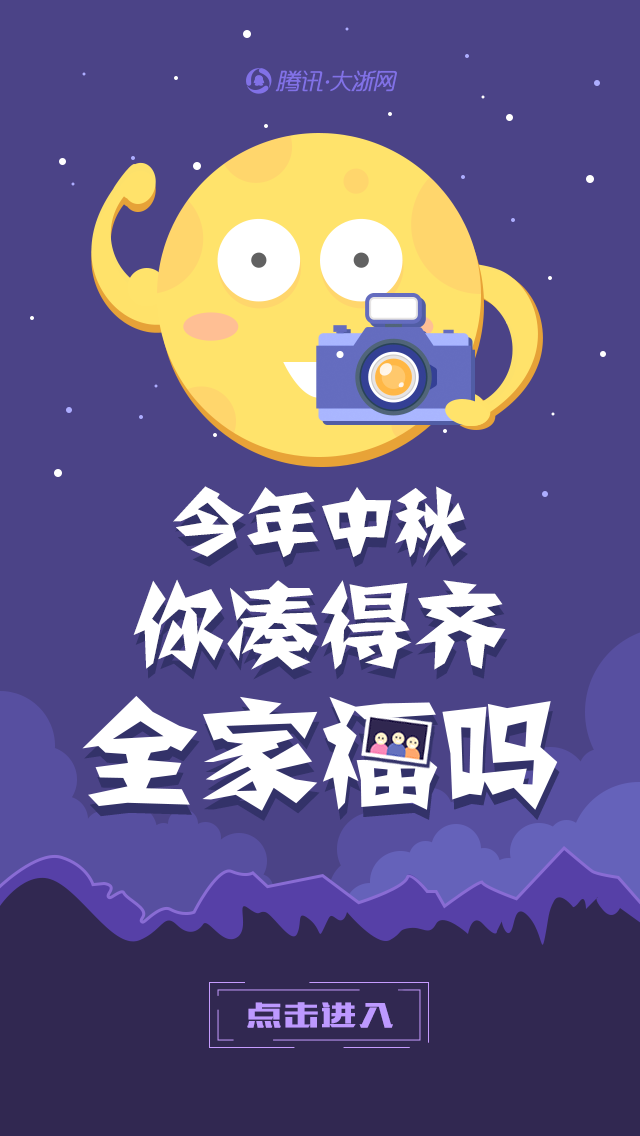
<style>
.page{position:relative;width:640px;height:1136px;background:#4b4387}
.page>*{position:absolute;margin:0}
.t1{font:74px "FZJZJW--GB1-0";color:#ffffff}
.t2{font:94px "FZJZJW--GB1-0";color:#ffffff}
.t3{font:34px "MFBanHei_Noncommercial-Regular";letter-spacing:0.1em;color:#bc98ff}
</style>
<div class="page">
<p class="t1" style="left:173px;top:486px;width:293px;height:72px">今年中秋</p>
<p class="t2" style="left:133px;top:579px;width:373px;height:91px">你凑得齐</p>
<p class="t3" style="left:247px;top:1002px;width:146px;height:26px">点击进入</p>
</div>
